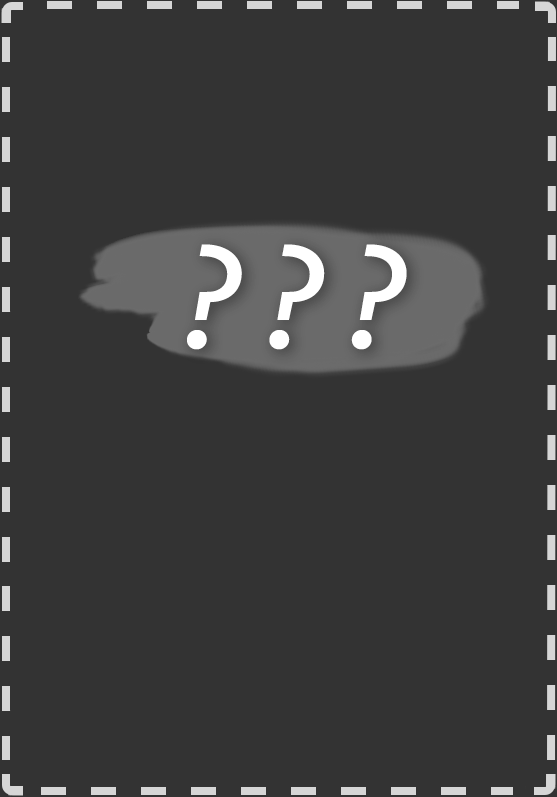
<style>
.page{position:relative;width:557px;height:797px;background:#333333}
.page>*{position:absolute;margin:0}
.t1{font:150px "Consolas-Italic";color:#ffffff}
</style>
<div class="page">
<p class="t1" style="left:187px;top:244px;width:220px;height:106px">???</p>
</div>
